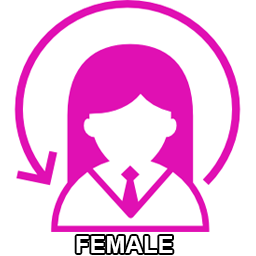
<style>
.page{position:relative;width:256px;height:256px;background:#ffffff}
.page>*{position:absolute;margin:0}
.t1{font:24px "Arial-BoldMT";color:#ffffff}
</style>
<div class="page">
<p class="t1" style="left:76px;top:236px;width:97px;height:17px">FEMALE</p>
</div>
